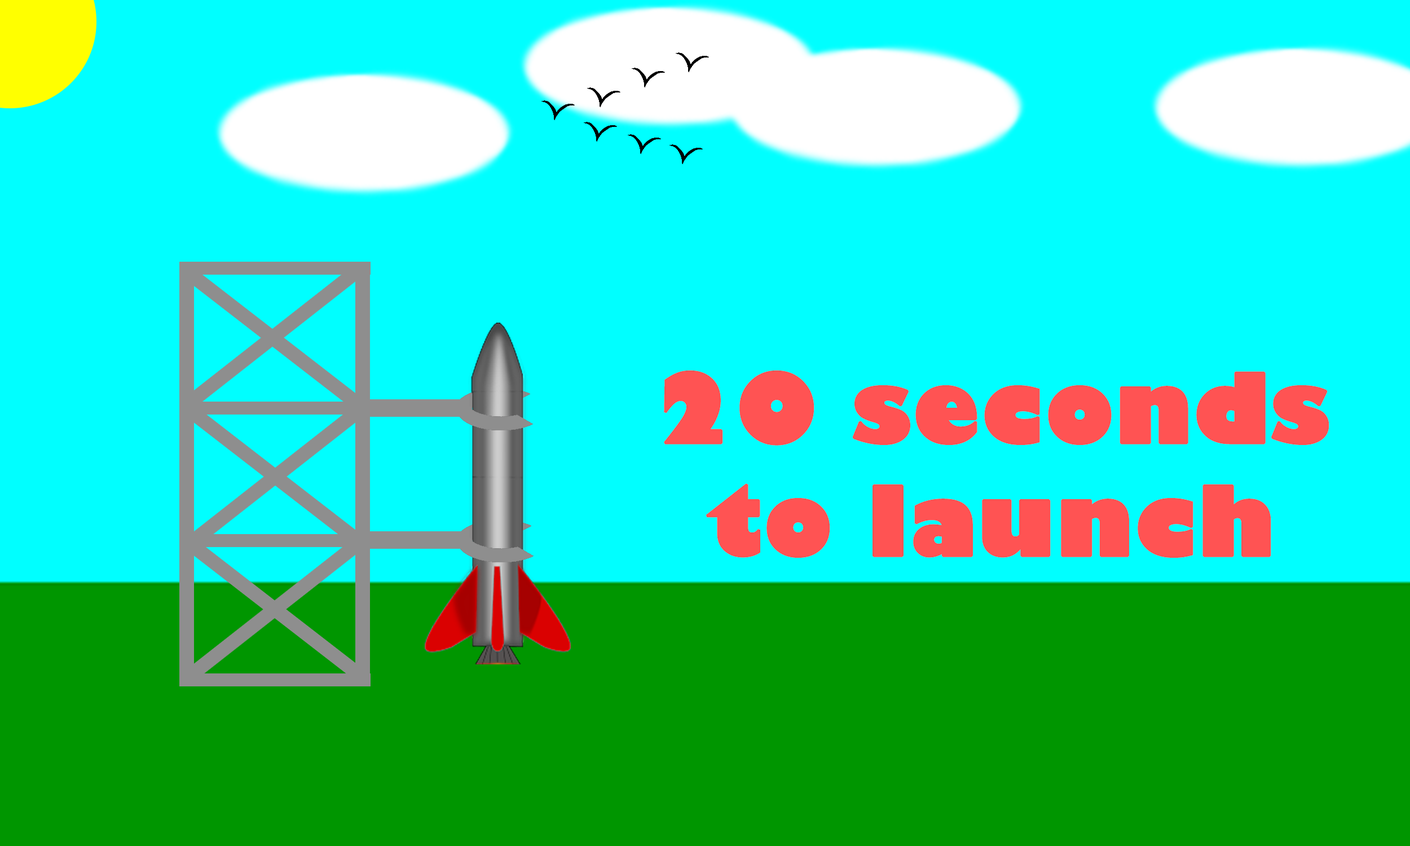
<style>
.page{position:relative;width:1410px;height:846px;background:#00ffff}
.page>*{position:absolute;margin:0}
.t1{font:94px "GillSans-UltraBold";color:#ff5353;font-weight:bold}
</style>
<div class="page">
<p class="t1" style="left:664px;top:370px;width:665px;height:188px;text-align:center">20 seconds<br>to launch</p>
</div>
